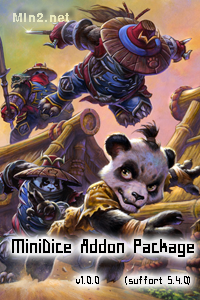
<style>
.page{position:relative;width:200px;height:300px}
.page>*{position:absolute;margin:0}
.t1{font:12px "H2gtrE";color:#e5e7c0}
.t2{font:14px "H2sa1M";color:#000000}
.t3{font:24px "H2sa1M";color:#000000}
</style>
<div class="page">
<p class="t1" style="left:13px;top:13px;width:56px;height:9px">Min2.net</p>
<p class="t2" style="left:12px;top:239px;width:182px;height:46px"><span class="t3">MiniDice Addon Package<br>        </span>v1.0.0     (suffort 5.4.0)</p>
</div>
